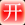
<style>
.page{position:relative;width:25px;height:25px}
.page>*{position:absolute;margin:0}
.t1{font:20px "SimSun";color:#ffffff}
</style>
<div class="page">
<p class="t1" style="left:3px;top:3px;width:19px;height:18px">开</p>
</div>
